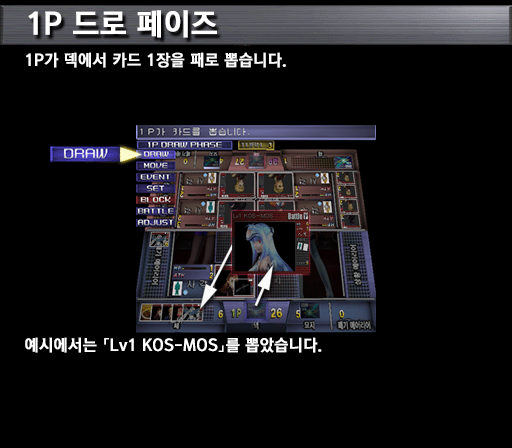
<style>
.page{position:relative;width:512px;height:448px;background:#000000}
.page>*{position:absolute;margin:0}
.t1{font:30px "KoreanGD15-R";color:#ffffff;font-weight:bold}
.t2{font:16px "KoreanGD15-R";color:#ffffff;font-weight:bold}
</style>
<div class="page">
<p class="t1" style="left:28px;top:10px;width:189px;height:28px">1P 드로 페이즈</p>
<p class="t2" style="left:26px;top:52px;width:260px;height:16px">1P가 덱에서 카드 1장을 패로 뽑습니다.</p>
<p class="t2" style="left:25px;top:337px;width:297px;height:16px">예시에서는 「Lv1 KOS-MOS」를 뽑았습니다.</p>
</div>
